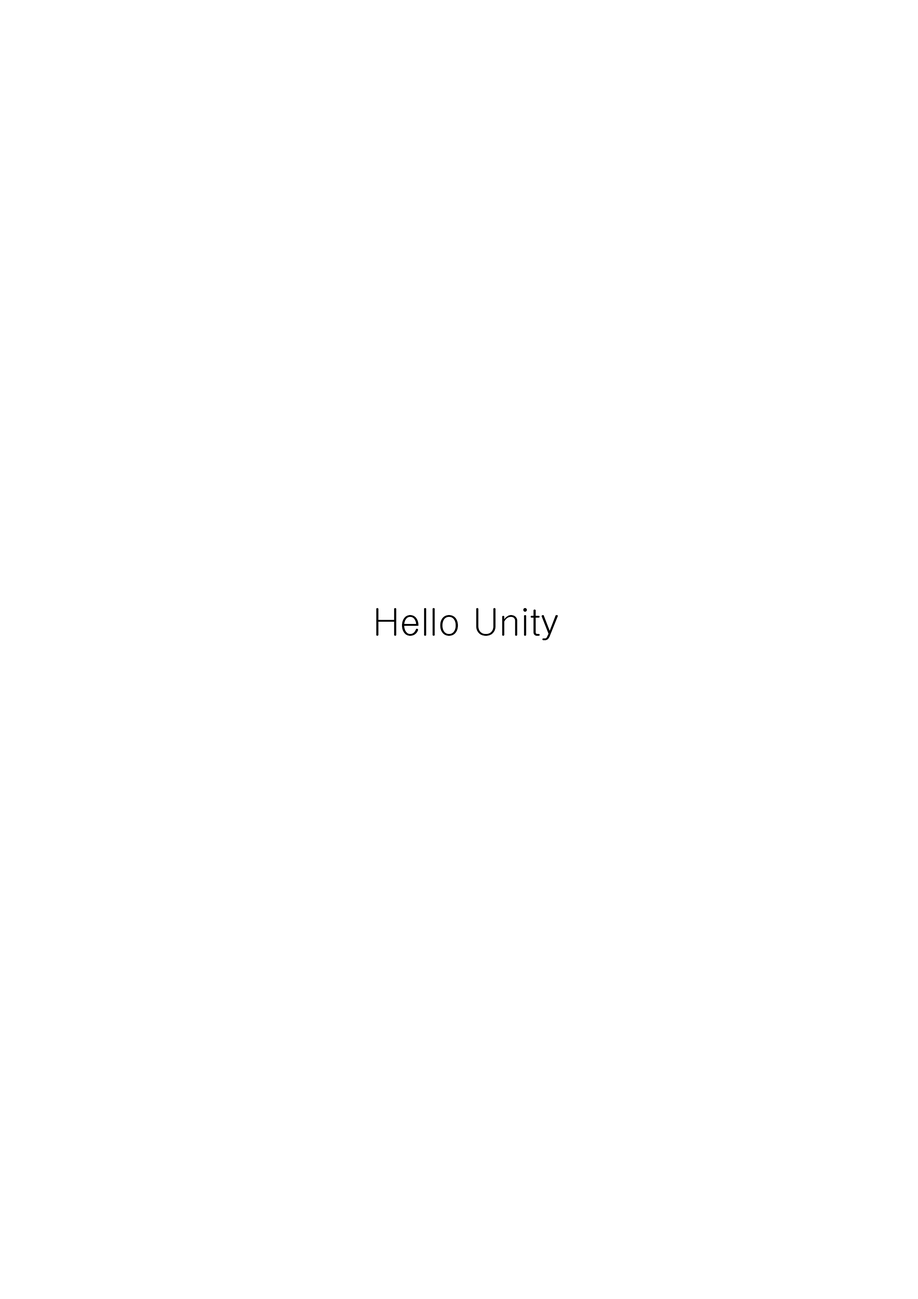
<style>
.page{position:relative;width:918px;height:1299px;background:#ffffff}
.page>*{position:absolute;margin:0}
.t1{font:37px "Gulim";color:#000000}
</style>
<div class="page">
<p class="t1" style="left:376px;top:608px;width:182px;height:32px">Hello Unity</p>
</div>
